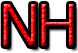
<style>
.page{position:relative;width:78px;height:53px;background:#ffffff}
.page>*{position:absolute;margin:0}
.t1{font:60px "DevanagariSangamMN"}
</style>
<div class="page">
<p class="t1" style="left:3px;top:4px;width:71px;height:42px">NH</p>
</div>
